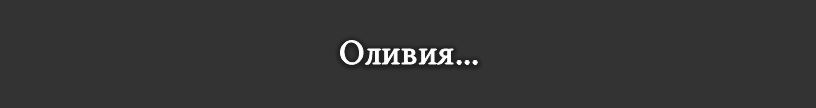
<style>
.page{position:relative;width:816px;height:108px;background:#333333}
.page>*{position:absolute;margin:0}
.t1{font:36px "CrimsonText-Regular";color:#ffffff}
</style>
<div class="page">
<p class="t1" style="left:340px;top:40px;width:138px;height:25px">Оливия...</p>
</div>
